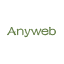
<style>
.page{position:relative;width:64px;height:64px;background:#ffffff}
.page>*{position:absolute;margin:0}
.t1{font:14px "FZSTK--GBK1-0";color:#5c783e}
</style>
<div class="page">
<p class="t1" style="left:7px;top:26px;width:49px;height:12px">Anyweb</p>
</div>
